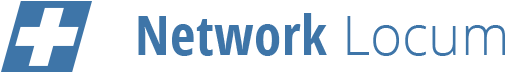
<style>
.page{position:relative;width:509px;height:74px;background:#ffffff}
.page>*{position:absolute;margin:0}
.t1{font:55px "OpenSans-CondensedBold";letter-spacing:0.01em;color:#3e75a8}
.t2{font:55px "OpenSans-Light";color:#3e75a8}
</style>
<div class="page">
<p class="t1" style="left:138px;top:13px;width:367px;height:43px">Network <span class="t2">Locum</span></p>
</div>
